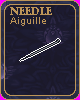
<style>
.page{position:relative;width:80px;height:100px}
.page>*{position:absolute;margin:0}
.t1{font:12px "TranscendSemibold";color:#bd9558}
.t2{font:10px "ArialMT";color:#bd9558}
</style>
<div class="page">
<p class="t1" style="left:10px;top:7px;width:42px;height:8px">needle</p>
<p class="t2" style="left:10px;top:17px;width:36px;height:9px">Aiguille</p>
</div>
